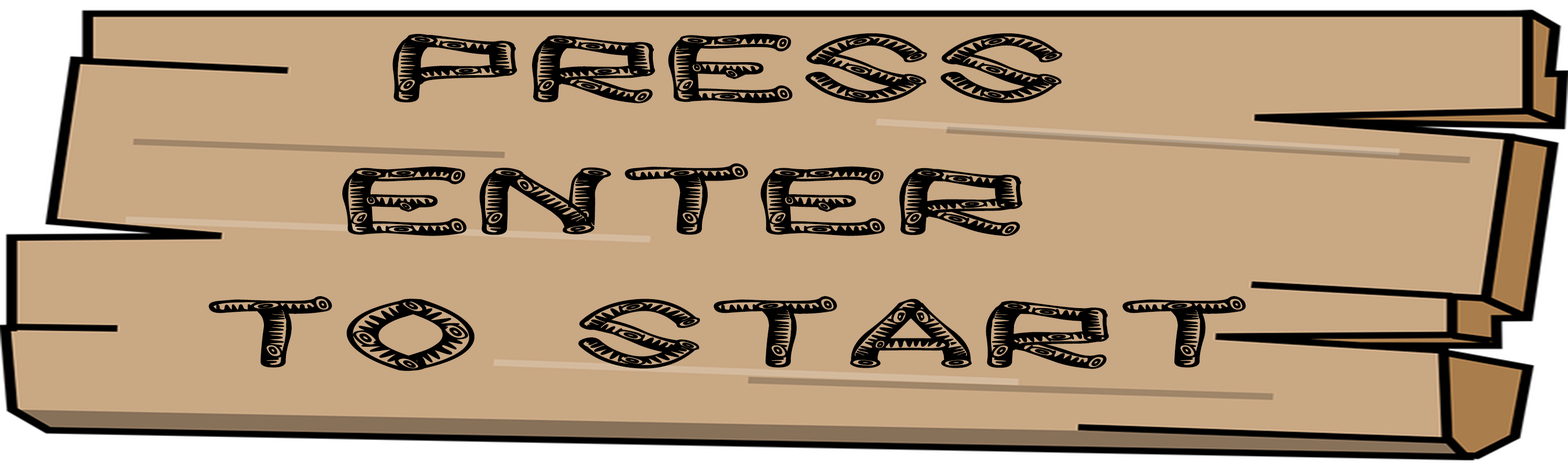
<style>
.page{position:relative;width:1568px;height:470px;background:#c9a884}
.page>*{position:absolute;margin:0}
.t1{font:110.8px "wood-sticks-Regular";color:#000000;font-weight:bold;scale:2.17 1}
</style>
<div class="page">
<p class="t1" style="left:209px;top:33px;width:1037px;height:339px;text-align:center">Press<br>enter <br>to start</p>
</div>
